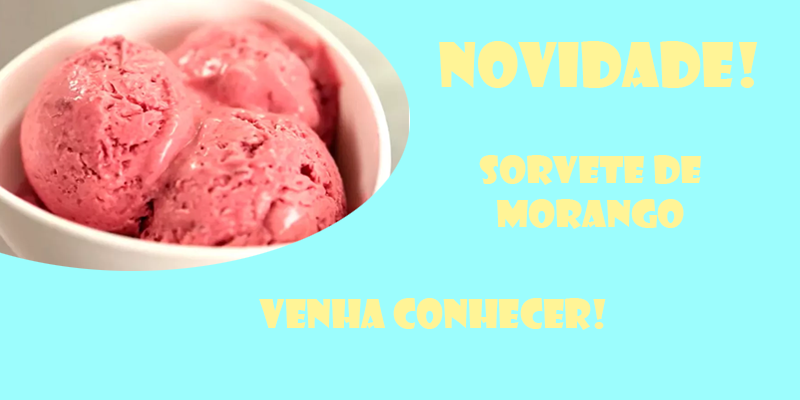
<style>
.page{position:relative;width:800px;height:400px;background:#9cfdfd}
.page>*{position:absolute;margin:0}
.t1{font:60px "ShowcardGothic-Reg";color:#fff496}
.t2{font:36px "ShowcardGothic-Reg";color:#fff496;scale:1.08 1}
.t3{font:38.8px "ShowcardGothic-Reg";color:#fff496}
</style>
<div class="page">
<p class="t1" style="left:439px;top:41px;width:319px;height:47px">NOVIDADE!</p>
<p class="t2" style="left:479px;top:155px;width:222px;height:74px;text-align:center">Sorvete de <br>morango</p>
<p class="t3" style="left:259px;top:298px;width:347px;height:32px">Venha conhecer!</p>
</div>
